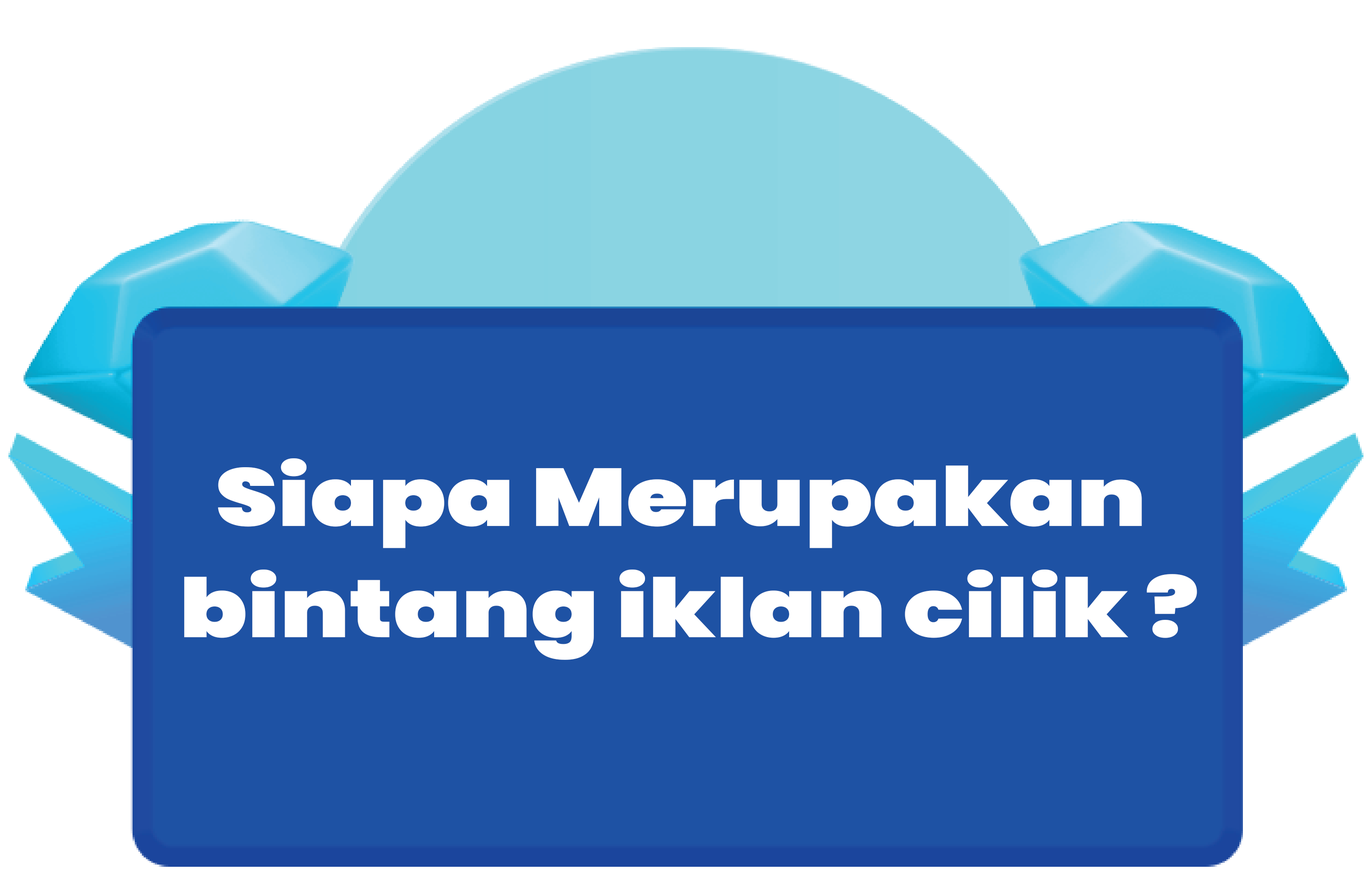
<style>
.page{position:relative;width:1367px;height:873px;background:#1e52a4}
.page>*{position:absolute;margin:0}
.t1{font:81.5px/111.2px "Poppins-Black";color:#ffffff;scale:1.23 1}
</style>
<div class="page">
<p class="t1" style="left:184px;top:458px;width:1013px;height:202px;text-align:center">Siapa Merupakan <br>bintang iklan cilik ?</p>
</div>
